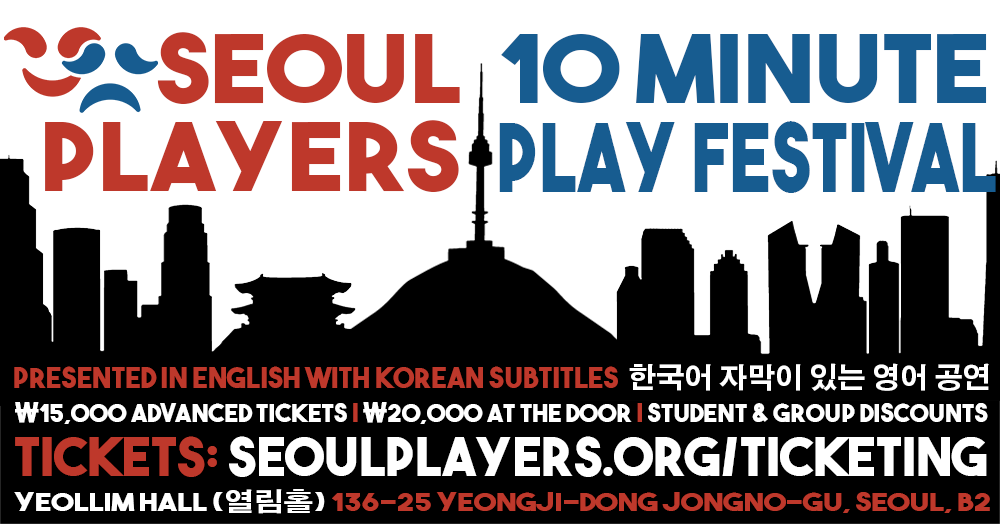
<style>
.page{position:relative;width:1000px;height:524px;background:#ffffff}
.page>*{position:absolute;margin:0}
.t1{font:93.6px/87px "TheBoldFont";color:#be382b;scale:1.09 1}
.t2{font:94.5px "TheBoldFont";color:#175c90;scale:1.1 1}
.t3{font:94.5px "TheBoldFont";color:#175c90;scale:0.8 1}
.t4{font:28.2px "TheBoldFont";color:#be382b}
.t5{font:28.2px "AdobeGothicStd-Bold";color:#ffffff}
.t6{font:25.2px "TheBoldFont";color:#ffffff}
.t7{font:25.2px "AdobeGothicStd-Bold";color:#ffffff;font-weight:bold}
.t8{font:25.2px "TheBoldFont";color:#be382b}
.t9{font:52.6px "TheBoldFont";color:#ffffff}
.t10{font:52.6px "TheBoldFont";color:#be382b}
.t11{font:25.2px "TheBoldFont";color:#be382b;scale:1.18 1}
.t12{font:25.2px "TheBoldFont";color:#ffffff;scale:1.18 1}
.t13{font:25.2px "AdobeGothicStd-Bold";color:#ffffff;scale:1.18 1}
</style>
<div class="page">
<p class="t1" style="left:45px;top:32px;width:415px;height:160px;text-align:right">Seoul<br>Players</p>
<p class="t2" style="left:501px;top:34px;width:486px;height:69px">10 minute</p>
<p class="t3" style="left:499px;top:121px;width:497px;height:72px">play festival</p>
<p class="t4" style="left:14px;top:363px;width:975px;height:28px">presented in english with korean subtitles  <span class="t5">한국어 자막이 있는 영어 공연</span></p>
<p class="t6" style="left:15px;top:402px;width:973px;height:22px"><span class="t7">₩</span>15,000 advanced tickets <span class="t8">| </span><span class="t7">₩</span>20,000 at the door <span class="t8">|</span> student &amp; group discounts</p>
<p class="t9" style="left:15px;top:436px;width:972px;height:41px"><span class="t10">tickets: </span>seoulplayers.org/ticketing</p>
<p class="t11" style="left:14px;top:489px;width:976px;height:25px"><span class="t12">YEOLLIM HALL (</span><span class="t13">열림홀</span><span class="t12">) </span>136-25 Yeongji-dong Jongno-gu, Seoul, B2</p>
</div>
